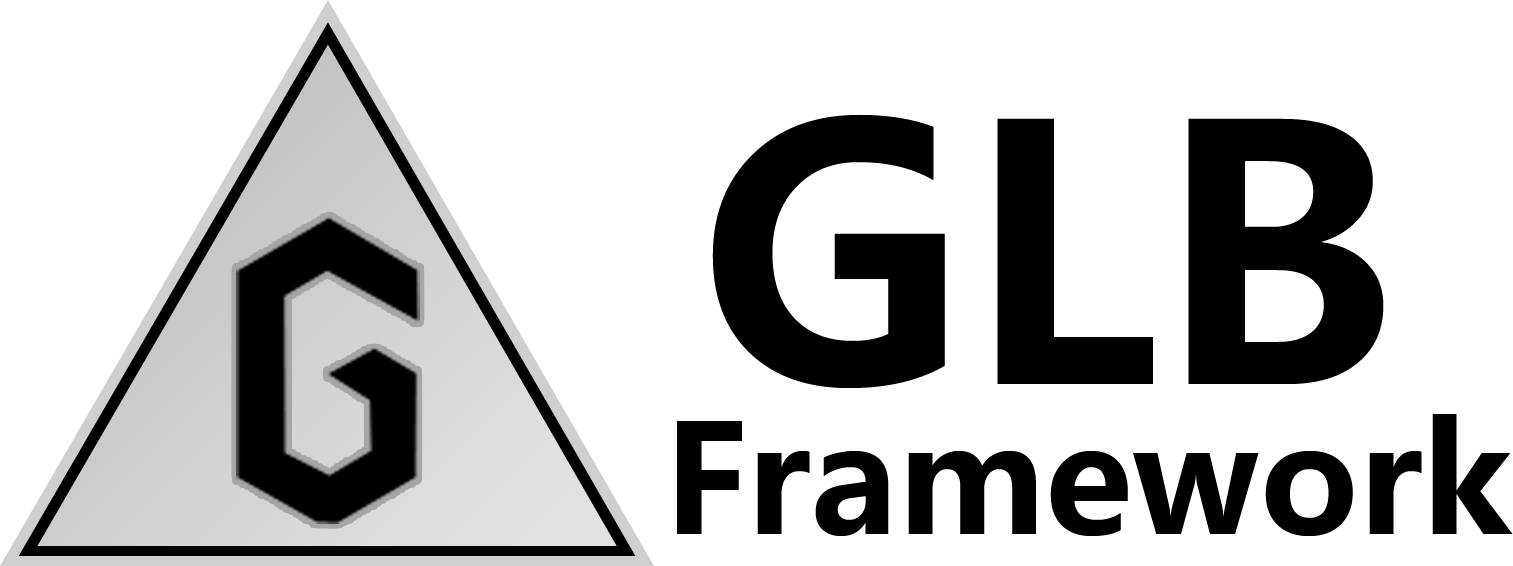
<style>
.page{position:relative;width:1513px;height:566px;background:#ffffff}
.page>*{position:absolute;margin:0}
.t1{font:350px "MicrosoftYaHei-Bold";color:#000000}
.t2{font:150px "MicrosoftYaHei-Bold";color:#000000}
</style>
<div class="page">
<p class="t1" style="left:712px;top:114px;width:672px;height:274px">GLB</p>
<p class="t2" style="left:677px;top:414px;width:836px;height:122px">Framework</p>
</div>
